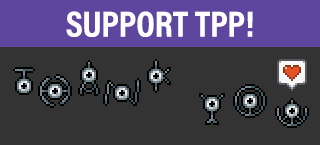
<style>
.page{position:relative;width:320px;height:145px;background:#333333}
.page>*{position:absolute;margin:0}
.t1{font:36.3px "AcuminProCond-Bold";color:#ffffff;text-transform:uppercase}
</style>
<div class="page">
<p class="t1" style="left:66px;top:11px;width:187px;height:26px">Support TPP!</p>
</div>
